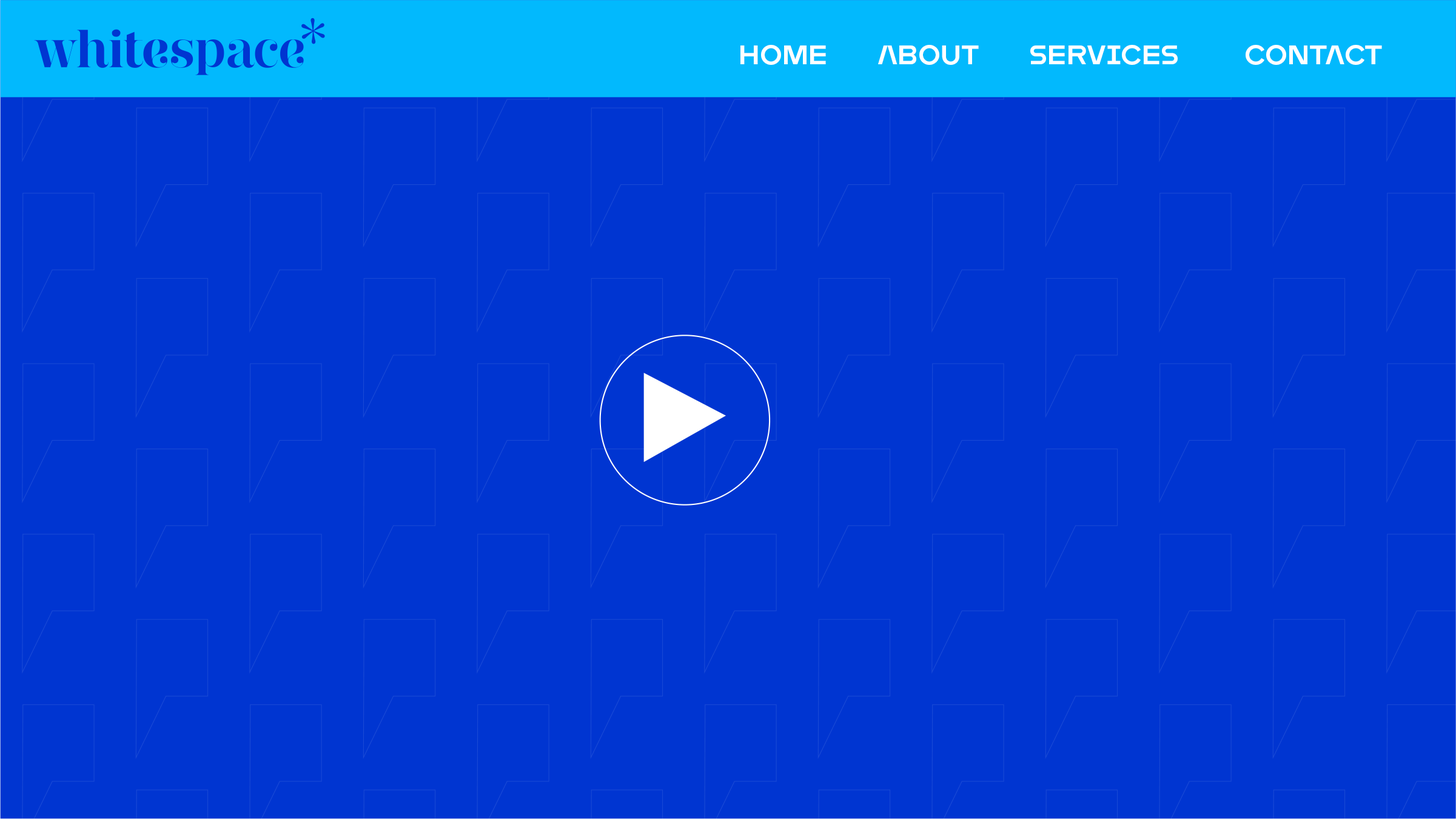
<style>
.page{position:relative;width:1456px;height:819px;background:#0035d1}
.page>*{position:absolute;margin:0}
.t1{font:27.2px "MonopolTRIAL-Regular";color:#ffffff}
</style>
<div class="page">
<p class="t1" style="left:740px;top:45px;width:86px;height:20px">Home</p>
<p class="t1" style="left:878px;top:45px;width:101px;height:20px">About</p>
<p class="t1" style="left:1030px;top:45px;width:147px;height:20px">Services</p>
<p class="t1" style="left:1245px;top:45px;width:137px;height:20px">Contact</p>
</div>
